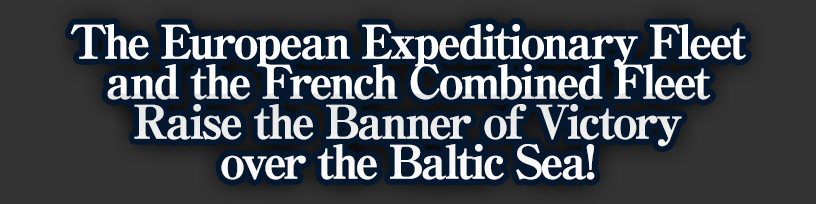
<style>
.page{position:relative;width:816px;height:204px;background:#333333}
.page>*{position:absolute;margin:0}
.t1{font:46px/40px "RyuminPro-ExBold";letter-spacing:-0.08em;color:#ffffff;font-weight:bold}
</style>
<div class="page">
<p class="t1" style="left:70px;top:24px;width:676px;height:156px;text-align:center">The European Expeditionary Fleet<br>and the French Combined Fleet<br>Raise the Banner of Victory<br>over the Baltic Sea!</p>
</div>
